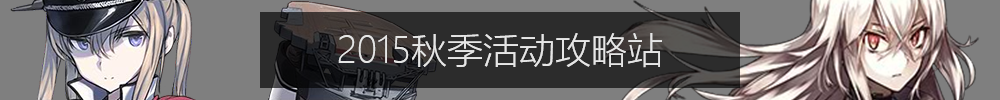
<style>
.page{position:relative;width:1000px;height:100px;background:#7f7f7f}
.page>*{position:absolute;margin:0}
.t1{font:36px "MicrosoftYaHeiUILight";color:#e6e6e6}
</style>
<div class="page">
<p class="t1" style="left:338px;top:33px;width:324px;height:35px">2015秋季活动攻略站</p>
</div>
